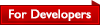
<style>
.page{position:relative;width:100px;height:25px;background:#ffffff}
.page>*{position:absolute;margin:0}
.t1{font:12.4px "GillSans";color:#ffffff;font-weight:bold}
</style>
<div class="page">
<p class="t1" style="left:9px;top:9px;width:82px;height:12px">For Developers</p>
</div>
